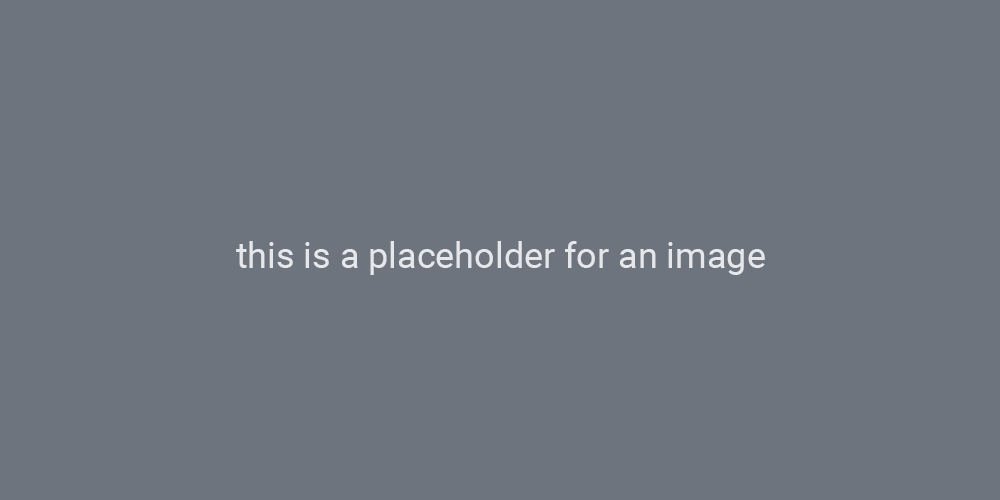
<style>
.page{position:relative;width:1000px;height:500px;background:#6d747d}
.page>*{position:absolute;margin:0}
.t1{font:36px "Roboto-Regular";color:#e5e7eb}
</style>
<div class="page">
<p class="t1" style="left:236px;top:241px;width:529px;height:34px">this is a placeholder for an image</p>
</div>
